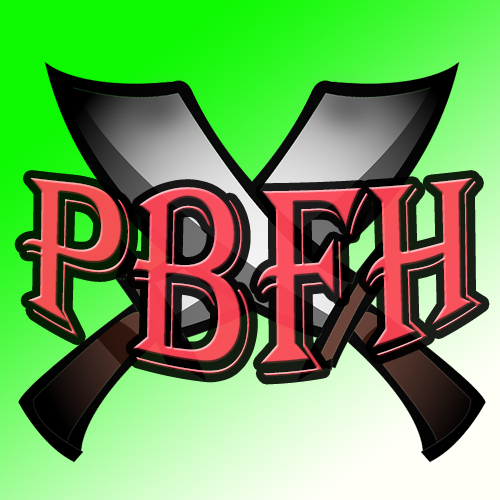
<style>
.page{position:relative;width:500px;height:500px}
.page>*{position:absolute;margin:0}
.t1{font:190px "Algerian";color:#fb4354}
</style>
<div class="page">
<p class="t1" style="left:22px;top:178px;width:460px;height:199px;opacity:0.95">PBFH</p>
</div>
